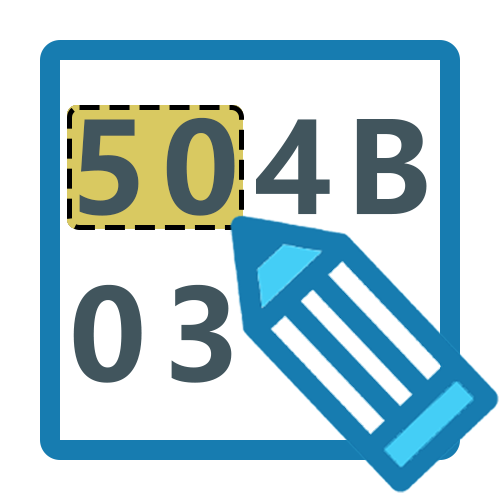
<style>
.page{position:relative;width:500px;height:500px;background:#ffffff}
.page>*{position:absolute;margin:0}
.t1{font:125px/166.7px "MicrosoftYaHeiUI-Bold";letter-spacing:0.12em;color:#41555d}
</style>
<div class="page">
<p class="t1" style="left:73px;top:117px;width:354px;height:266px">504B<br>03</p>
</div>
